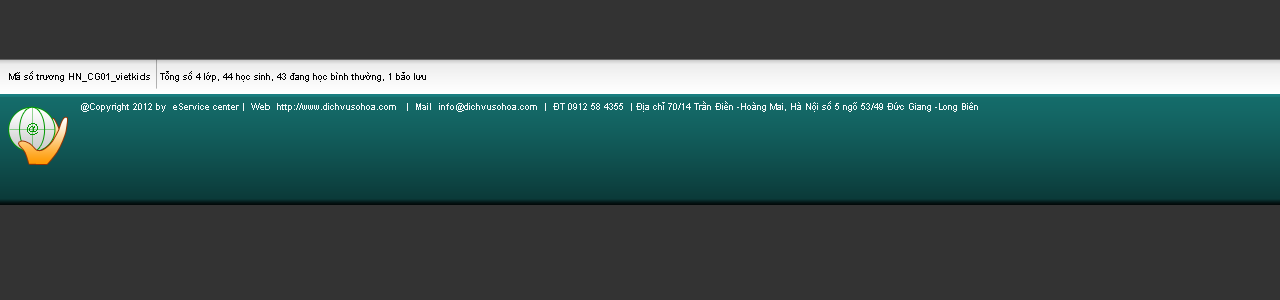
<style>
.page{position:relative;width:1280px;height:300px;background:#333333}
.page>*{position:absolute;margin:0}
.t1{font:9.3px "ArialMT";color:#000000}
.t2{font:9.3px "Arial-BoldMT";color:#000000}
.t3{font:9.3px "ArialMT";color:#f8fbfb}
.t4{font:9.3px "Arial-BoldMT";color:#f8fbfb}
.t5{font:11.9px "ArialMT";color:#009900}
</style>
<div class="page">
<p class="t1" style="left:9px;top:71px;width:417px;height:11px">Mã số trương <span class="t2">HN_CG01_vietkids</span>   Tổng số 4 lớp, 44 học sinh, 43 đang học bình thường, 1 bảo lưu</p>
<p class="t3" style="left:81px;top:101px;width:897px;height:11px">@Copyright 2012 by  eService center |  <span class="t4">Web</span>  http://www.dichvusohoa.com   |  <span class="t4">Mail</span>  info@dichvusohoa.com  |  <span class="t4">ĐT</span> 0912 58 4355  | Địa chỉ 70/14 Trần Điền -Hoàng Mai, Hà Nội số 5 ngõ 53/49 Đức Giang -Long Biên</p>
<p class="t5" style="left:27px;top:123px;width:11px;height:12px">@</p>
</div>
